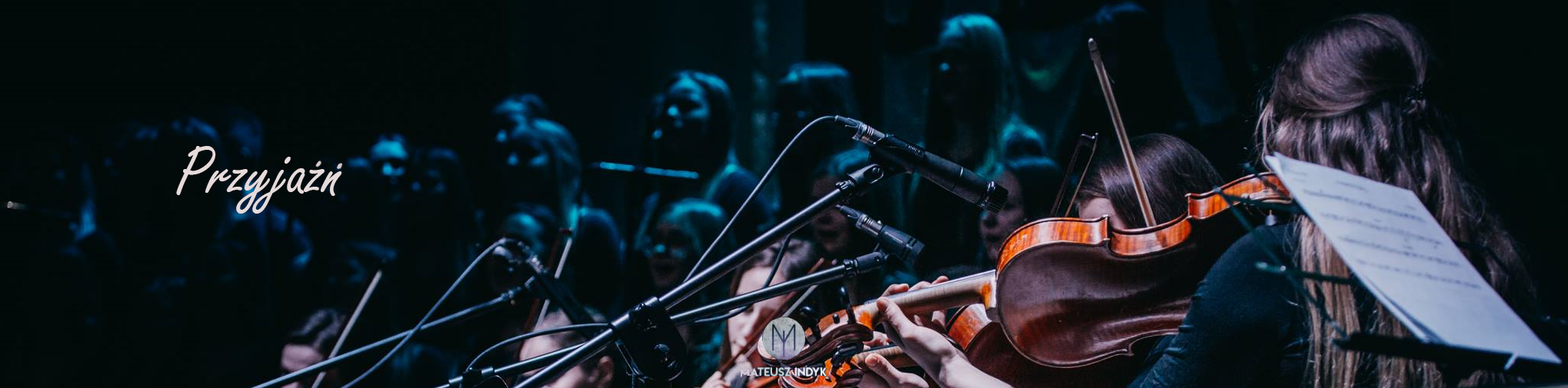
<style>
.page{position:relative;width:1568px;height:388px}
.page>*{position:absolute;margin:0}
.t1{font:73.8px "FreestyleScript-Regular";color:#e6dbdb}
</style>
<div class="page">
<p class="t1" style="left:176px;top:146px;width:166px;height:68px">Przyjazn</p>
</div>
